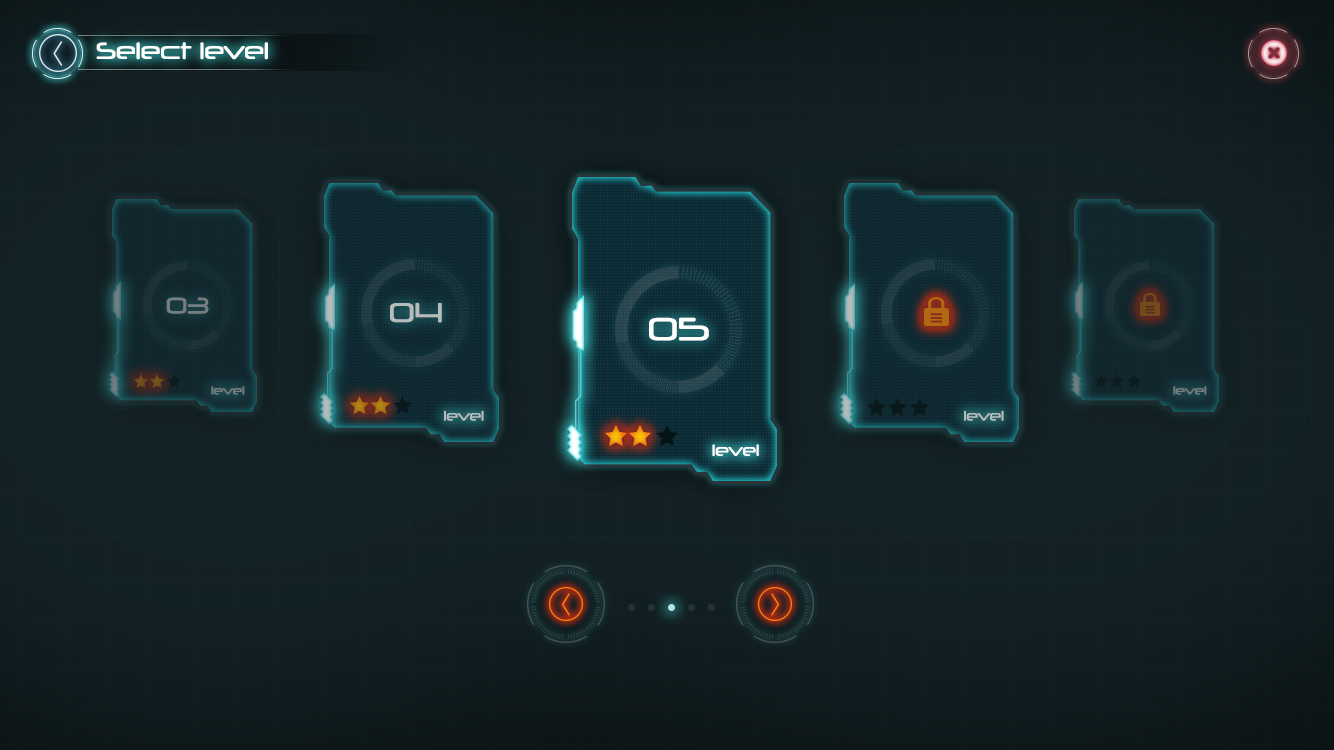
<style>
.page{position:relative;width:1334px;height:750px}
.page>*{position:absolute;margin:0}
.t1{font:22.6px "Neuropol-Regular";color:#ffffff}
.t2{font:21.8px "Neuropol-Regular";color:#747d7f}
.t3{font:26.5px "Neuropol-Regular";color:#b6bbbc}
.t4{font:31px "Neuropol-Regular";color:#ffffff}
.t5{font:10.9px "Neuropol-Regular";color:#747d7f}
.t6{font:13.2px "Neuropol-Regular";color:#b6bbbc}
.t7{font:15.5px "Neuropol-Regular";color:#ffffff}
</style>
<div class="page">
<p class="t1" style="left:96px;top:42px;width:172px;height:18px">Select level</p>
<p class="t2" style="left:166px;top:297px;width:43px;height:17px">03</p>
<p class="t3" style="left:390px;top:302px;width:52px;height:21px">04</p>
<p class="t4" style="left:649px;top:317px;width:60px;height:24px">05</p>
<p class="t5" style="left:211px;top:386px;width:34px;height:9px">level</p>
<p class="t5" style="left:1173px;top:386px;width:34px;height:9px">level</p>
<p class="t6" style="left:444px;top:410px;width:40px;height:11px">level</p>
<p class="t6" style="left:964px;top:410px;width:40px;height:11px">level</p>
<p class="t7" style="left:712px;top:444px;width:47px;height:12px">level</p>
</div>
